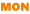
<style>
.page{position:relative;width:30px;height:14px;background:#ffffff}
.page>*{position:absolute;margin:0}
.t1{font:11px "SegoeUIBlack";letter-spacing:0.035em;color:#f67e00}
</style>
<div class="page">
<p class="t1" style="left:1px;top:2px;width:28px;height:9px">MON</p>
</div>
